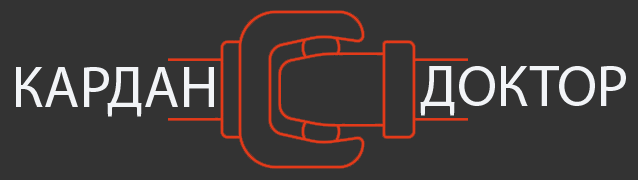
<style>
.page{position:relative;width:638px;height:180px;background:#333333}
.page>*{position:absolute;margin:0}
.t1{font:58.3px "MyriadPro-Regular";color:#f2f4f7}
</style>
<div class="page">
<p class="t1" style="left:16px;top:67px;width:198px;height:50px">КАРДАН</p>
<p class="t1" style="left:420px;top:66px;width:206px;height:50px">ДОКТОР</p>
</div>
